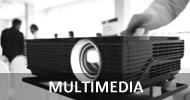
<style>
.page{position:relative;width:190px;height:100px}
.page>*{position:absolute;margin:0}
.t1{font:16.7px "Calibri";color:#ffffff;font-weight:bold}
</style>
<div class="page">
<p class="t1" style="left:49px;top:81px;width:95px;height:12px">MULTIMEDIA</p>
</div>
